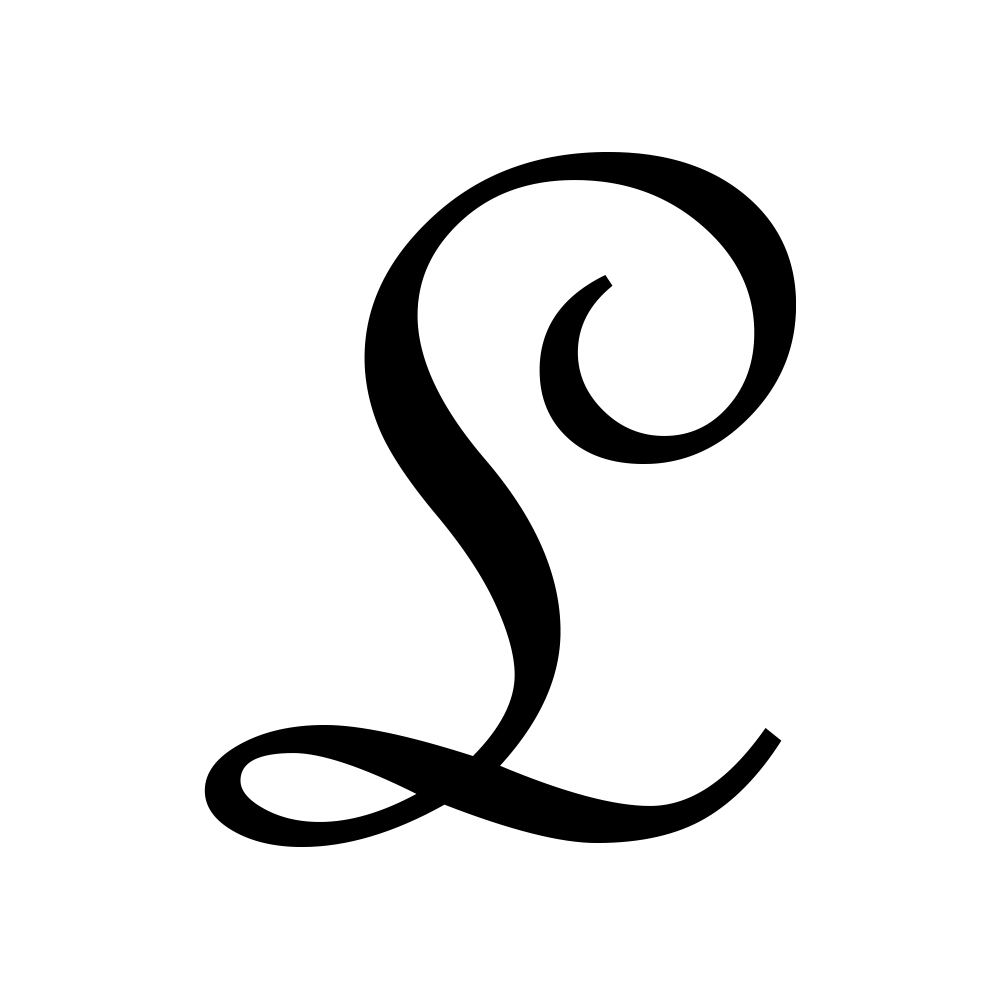
<style>
.page{position:relative;width:1000px;height:1000px;background:#ffffff}
.page>*{position:absolute;margin:0}
.t1{font:1041.7px "FrenchScriptMT";color:#000000}
</style>
<div class="page">
<p class="t1" style="left:204px;top:152px;width:592px;height:695px">L</p>
</div>
